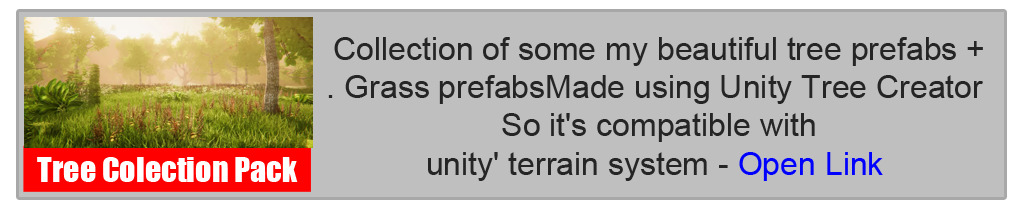
<style>
.page{position:relative;width:1024px;height:210px;background:#bfbfbf}
.page>*{position:absolute;margin:0}
.t1{font:32px "ArialMT";color:#252525}
.t2{font:32px "ArialMT";color:#0000ff}
.t3{font:32px "Impact";color:#ffffff}
</style>
<div class="page">
<p class="t1" style="left:328px;top:37px;width:655px;height:144px;text-align:center">+ Collection of some my beautiful tree prefabs  <br> Grass prefabsMade using Unity Tree Creator . <br>So it's compatible with <br>unity' terrain system - <span class="t2">Open Link</span></p>
<p class="t3" style="left:37px;top:157px;width:261px;height:25px">Tree Colection Pack</p>
</div>
